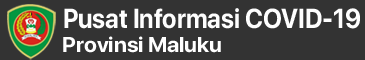
<style>
.page{position:relative;width:365px;height:60px;background:#333333}
.page>*{position:absolute;margin:0}
.t1{font:27.3px "SFProDisplay-Bold";color:#fefefe;scale:0.92 1}
.t2{font:21.2px "SFProDisplay-Bold";color:#ffffff;scale:1.05 1}
</style>
<div class="page">
<p class="t1" style="left:64px;top:8px;width:296px;height:21px">Pusat Informasi COVID-19</p>
<p class="t2" style="left:63px;top:36px;width:158px;height:17px">Provinsi Maluku</p>
</div>
